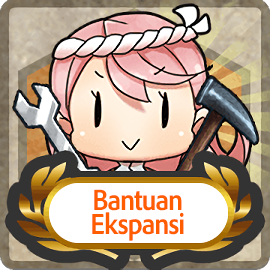
<style>
.page{position:relative;width:270px;height:270px}
.page>*{position:absolute;margin:0}
.t1{font:30px/24px "AdobeClean-Bold";letter-spacing:-0.04em;color:#ff5d00;scale:0.9 1}
</style>
<div class="page">
<p class="t1" style="left:92px;top:189px;width:92px;height:52px;text-align:center">Bantuan<br>Ekspansi</p>
</div>
